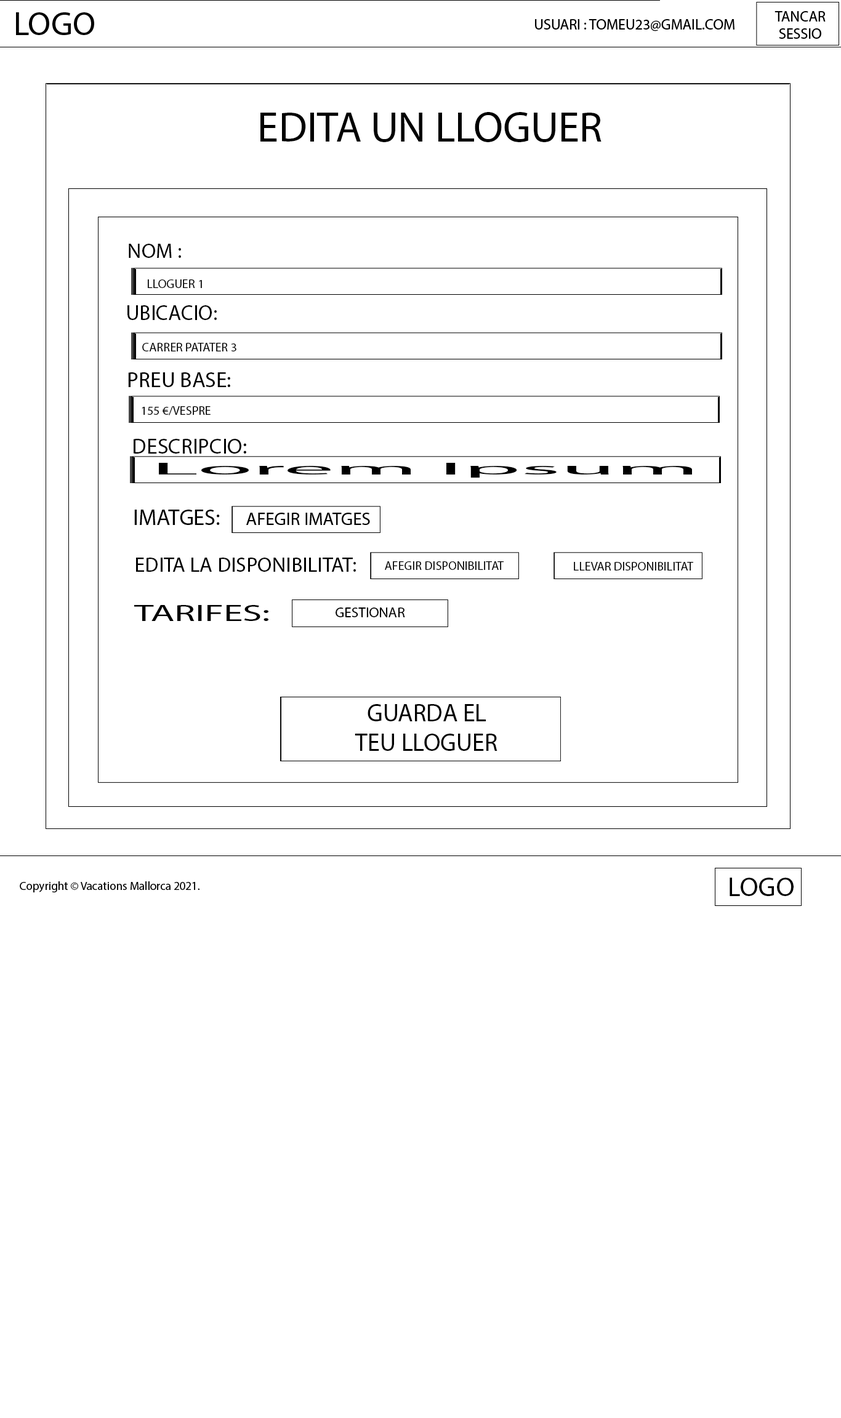
<style>
.page{position:relative;width:841px;height:1418px;background:#ffffff}
.page>*{position:absolute;margin:0}
.t1{font:42.7px "MyriadPro-Regular";color:#000000}
.t2{font:20.9px "MyriadPro-Regular";color:#000000}
.t3{font:12.3px "MyriadPro-Regular";color:#000000}
.t4{font:21.2px "MyriadPro-Regular";color:#000000}
.t5{font:21.9px "MyriadPro-Regular";color:#000000}
.t6{font:21.8px "MyriadPro-Regular";color:#000000}
.t7{font:17px "MyriadPro-Regular";color:#000000;scale:5.87 1}
.t8{font:22.5px "MyriadPro-Regular";color:#000000}
.t9{font:21px "MyriadPro-Regular";color:#000000}
.t10{font:23.2px "MyriadPro-Regular";color:#000000;scale:1.68 1}
.t11{font:14.3px "MyriadPro-Regular";color:#000000}
.t12{font:24.7px "MyriadPro-Regular";color:#000000}
</style>
<div class="page">
<p class="t1" style="left:260px;top:112px;width:341px;height:30px">EDITA UN LLOGUER</p>
<p class="t2" style="left:129px;top:244px;width:52px;height:14px">NOM :</p>
<p class="t3" style="left:148px;top:279px;width:54px;height:9px">LLOGUER 1</p>
<p class="t4" style="left:127px;top:305px;width:90px;height:15px">UBICACIO:</p>
<p class="t3" style="left:142px;top:343px;width:94px;height:8px">CARRER PATATER 3</p>
<p class="t5" style="left:128px;top:372px;width:102px;height:15px">PREU BASE:</p>
<p class="t3" style="left:142px;top:406px;width:69px;height:9px">155 €/VESPRE</p>
<p class="t6" style="left:134px;top:439px;width:112px;height:15px">DESCRIPCIO:</p>
<p class="t7" style="left:159px;top:463px;width:533px;height:15px">Lorem Ipsum</p>
<p class="t8" style="left:134px;top:510px;width:86px;height:15px">IMATGES:</p>
<p class="t9" style="left:136px;top:558px;width:220px;height:14px">EDITA LA DISPONIBILITAT:</p>
<p class="t3" style="left:385px;top:561px;width:119px;height:9px">AFEGIR DISPONIBILITAT</p>
<p class="t3" style="left:574px;top:562px;width:119px;height:9px">LLEVAR DISPONIBILITAT</p>
<p class="t10" style="left:134px;top:605px;width:134px;height:16px">TARIFES:</p>
<p class="t11" style="left:335px;top:608px;width:70px;height:9px">GESTIONAR</p>
<p class="t12" style="left:355px;top:704px;width:142px;height:47px;text-align:center">GUARDA EL<br>TEU LLOGUER</p>
</div>
